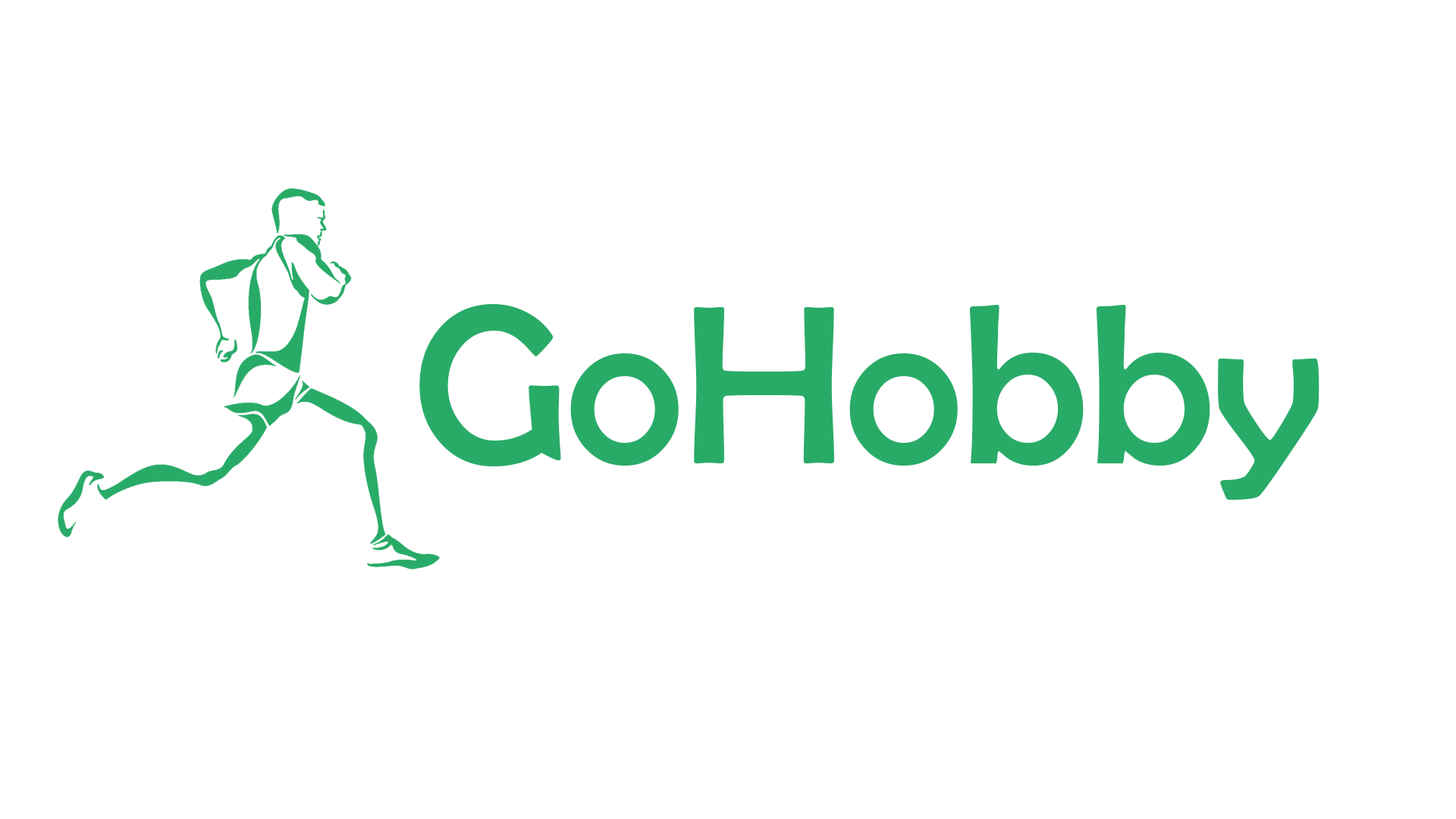
<style>
.page{position:relative;width:1456px;height:819px;background:#ffffff}
.page>*{position:absolute;margin:0}
.t1{font:227.5px "BerlinSansFB-Reg";color:#29ab68}
</style>
<div class="page">
<p class="t1" style="left:419px;top:304px;width:900px;height:196px">GoHobby</p>
</div>
